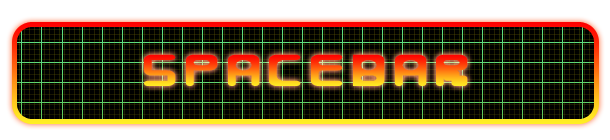
<style>
.page{position:relative;width:610px;height:140px;background:#ffffff}
.page>*{position:absolute;margin:0}
.t1{font:41.7px "SPACE-AGE";letter-spacing:0.025em;scale:1.5 1}
</style>
<div class="page">
<p class="t1" style="left:144px;top:54px;width:324px;height:32px">Spacebar</p>
</div>
